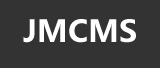
<style>
.page{position:relative;width:160px;height:68px;background:#333333}
.page>*{position:absolute;margin:0}
.t1{font:30px "MicrosoftYaHei-Bold";color:#ffffff}
</style>
<div class="page">
<p class="t1" style="left:23px;top:19px;width:113px;height:24px">JMCMS</p>
</div>
